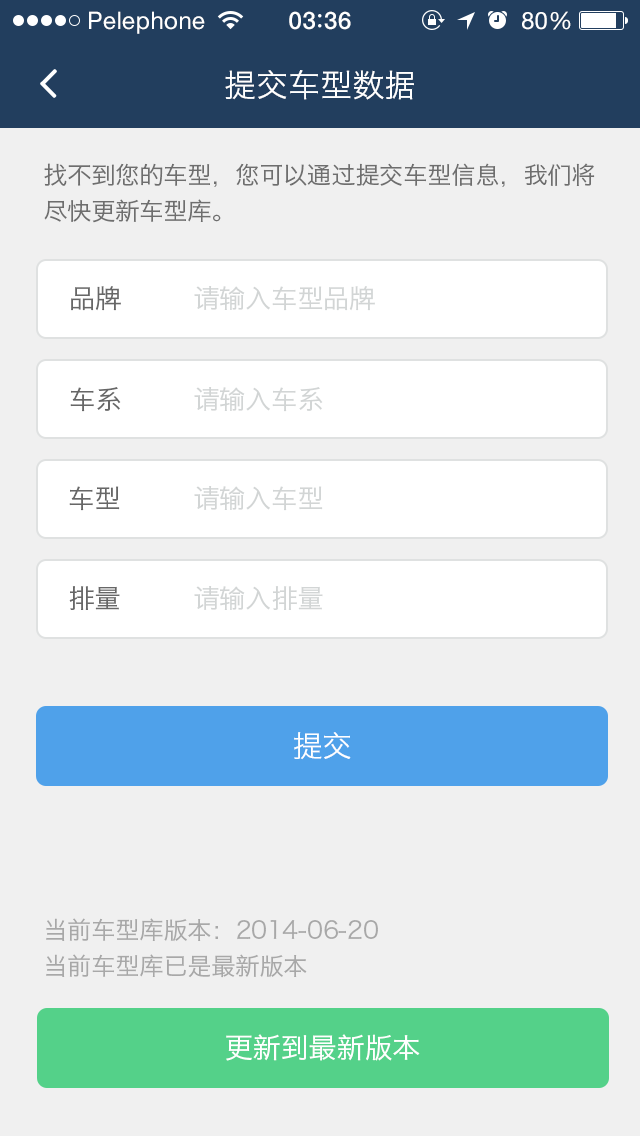
<style>
.page{position:relative;width:640px;height:1136px;background:#f0f0f0}
.page>*{position:absolute;margin:0}
.t1{font:24px "HelveticaNeue";letter-spacing:0.02em;color:#ffffff}
.t2{font:24px "HelveticaNeue-Medium";letter-spacing:0.03em;color:#ffffff}
.t3{font:32px "HiraginoSansGB-W3";color:#ffffff}
.t4{font:24px/36px "HiraginoSansGB-W3";color:#6e6e6e}
.t5{font:26px "HiraginoSansGB-W3";color:#676767}
.t6{font:26px "HiraginoSansGB-W3";color:#d2d5d5}
.t7{font:30px "HiraginoSansGB-W3";color:#ffffff}
.t8{font:24px/36px "HiraginoSansGB-W3";color:#a8a8a8}
.t9{font:28px "HiraginoSansGB-W3";color:#ffffff}
</style>
<div class="page">
<p class="t1" style="left:89px;top:11px;width:116px;height:23px">Pelephone</p>
<p class="t2" style="left:289px;top:11px;width:62px;height:19px">03 36</p>
<p class="t1" style="left:522px;top:11px;width:49px;height:19px">80%</p>
<p class="t3" style="left:225px;top:70px;width:189px;height:30px">提交车型数据</p>
<p class="t4" style="left:44px;top:163px;width:551px;height:60px">找不到您的车型，您可以通过提交车型信息，我们将<br>尽快更新车型库。</p>
<p class="t5" style="left:71px;top:286px;width:50px;height:25px">品牌</p>
<p class="t6" style="left:194px;top:286px;width:181px;height:25px">请输入车型品牌</p>
<p class="t5" style="left:70px;top:387px;width:51px;height:25px">车系</p>
<p class="t6" style="left:194px;top:387px;width:129px;height:25px">请输入车系</p>
<p class="t5" style="left:69px;top:486px;width:51px;height:25px">车型</p>
<p class="t6" style="left:194px;top:486px;width:129px;height:25px">请输入车型</p>
<p class="t5" style="left:69px;top:586px;width:51px;height:24px">排量</p>
<p class="t6" style="left:194px;top:586px;width:129px;height:24px">请输入排量</p>
<p class="t7" style="left:294px;top:732px;width:57px;height:28px">提交</p>
<p class="t8" style="left:46px;top:918px;width:332px;height:60px">当前车型库版本：2014-06-20<br>当前车型库已是最新版本</p>
<p class="t9" style="left:226px;top:1034px;width:194px;height:27px">更新到最新版本</p>
</div>
